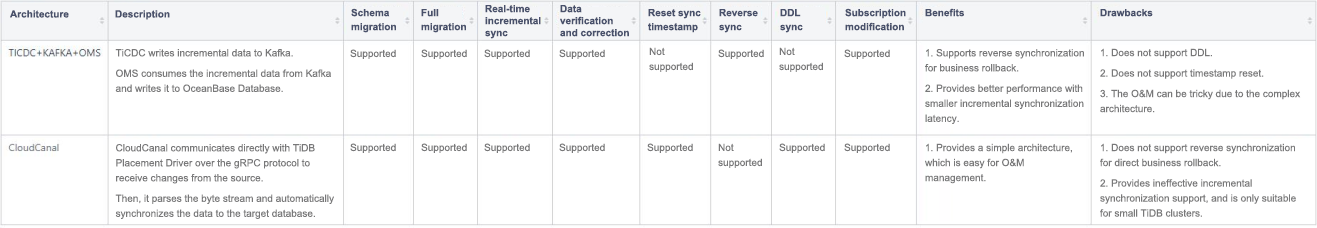
<style>
.page{position:relative;width:1317px;height:228px;background:#ffffff}
.page>*{position:absolute;margin:0}
.t1{font:10px/12px "Arial-BoldMT";color:#49516b}
.t2{font:10px "Arial-BoldMT";color:#49516b}
.t3{font:10px/14px "Arial-BoldMT";color:#49516b}
.t4{font:10px/15px "ArialMT";color:#787879}
.t5{font:10px "ArialMT";color:#787879}
</style>
<div class="page">
<p class="t1" style="left:485px;top:5px;width:56px;height:34px">Real-time incremental sync</p>
<p class="t1" style="left:560px;top:5px;width:69px;height:32px">Data verification and correction</p>
<p class="t2" style="left:10px;top:10px;width:59px;height:8px">Architecture</p>
<p class="t2" style="left:115px;top:10px;width:55px;height:10px">Description</p>
<p class="t3" style="left:351px;top:8px;width:45px;height:25px">Schema migration</p>
<p class="t3" style="left:421px;top:9px;width:45px;height:24px">Full migration</p>
<p class="t3" style="left:648px;top:9px;width:53px;height:24px">Reset sync timestamp</p>
<p class="t3" style="left:719px;top:9px;width:39px;height:24px">Reverse sync</p>
<p class="t3" style="left:780px;top:9px;width:23px;height:24px">DDL sync</p>
<p class="t3" style="left:845px;top:8px;width:61px;height:23px">Subscription modification</p>
<p class="t2" style="left:925px;top:8px;width:39px;height:9px">Benefits</p>
<p class="t2" style="left:1100px;top:9px;width:53px;height:8px">Drawbacks</p>
<p class="t4" style="left:115px;top:49px;width:216px;height:43px">TiCDC writes incremental data to Kafka.<br>OMS consumes the incremental data from Kafka and writes it to OceanBase Database.</p>
<p class="t5" style="left:350px;top:49px;width:46px;height:10px">Supported</p>
<p class="t5" style="left:421px;top:49px;width:46px;height:10px">Supported</p>
<p class="t5" style="left:484px;top:49px;width:46px;height:10px">Supported</p>
<p class="t5" style="left:559px;top:49px;width:46px;height:10px">Supported</p>
<p class="t4" style="left:649px;top:47px;width:44px;height:25px">Not <br>supported</p>
<p class="t5" style="left:718px;top:49px;width:46px;height:10px">Supported</p>
<p class="t4" style="left:779px;top:47px;width:44px;height:25px">Not <br>supported</p>
<p class="t5" style="left:844px;top:49px;width:46px;height:10px">Supported</p>
<p class="t4" style="left:925px;top:49px;width:159px;height:75px">1. Supports reverse synchronization for business rollback.<br>2. Provides better performance with smaller incremental synchronization latency.</p>
<p class="t4" style="left:1100px;top:48px;width:201px;height:65px">1. Does not support DDL.<br>2. Does not support timestamp reset.<br>3. The O&amp;M can be tricky due to the complex architecture.</p>
<p class="t4" style="left:115px;top:144px;width:219px;height:75px">CloudCanal communicates directly with TiDB Placement Driver over the gRPC protocol to receive changes from the source.<br>Then, it parses the byte stream and automatically synchronizes the data to the target database.</p>
<p class="t5" style="left:350px;top:143px;width:46px;height:10px">Supported</p>
<p class="t5" style="left:421px;top:143px;width:46px;height:10px">Supported</p>
<p class="t5" style="left:484px;top:143px;width:46px;height:10px">Supported</p>
<p class="t5" style="left:559px;top:143px;width:46px;height:10px">Supported</p>
<p class="t5" style="left:647px;top:143px;width:46px;height:10px">Supported</p>
<p class="t4" style="left:718px;top:143px;width:44px;height:25px">Not <br>supported</p>
<p class="t5" style="left:779px;top:143px;width:46px;height:10px">Supported</p>
<p class="t5" style="left:844px;top:143px;width:46px;height:10px">Supported</p>
<p class="t4" style="left:925px;top:143px;width:147px;height:41px">1. Provides a simple architecture, which is easy for O&amp;M management.</p>
<p class="t4" style="left:1100px;top:143px;width:196px;height:74px">1. Does not support reverse synchronization for direct business rollback.<br>2. Provides ineffective incremental synchronization support, and is only suitable for small TiDB clusters.</p>
</div>
